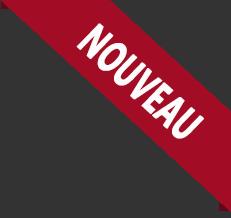
<style>
.page{position:relative;width:231px;height:218px;background:#333333}
.page>*{position:absolute;margin:0}
.t1{font:45.8px "KhmerUI-Bold";color:#fdfbfb;font-weight:bold;scale:0.63 1}
</style>
<div class="page">
<p class="t1" style="left:76px;top:23px;width:128px;height:116px;rotate:42deg">NOUVEAU</p>
</div>
